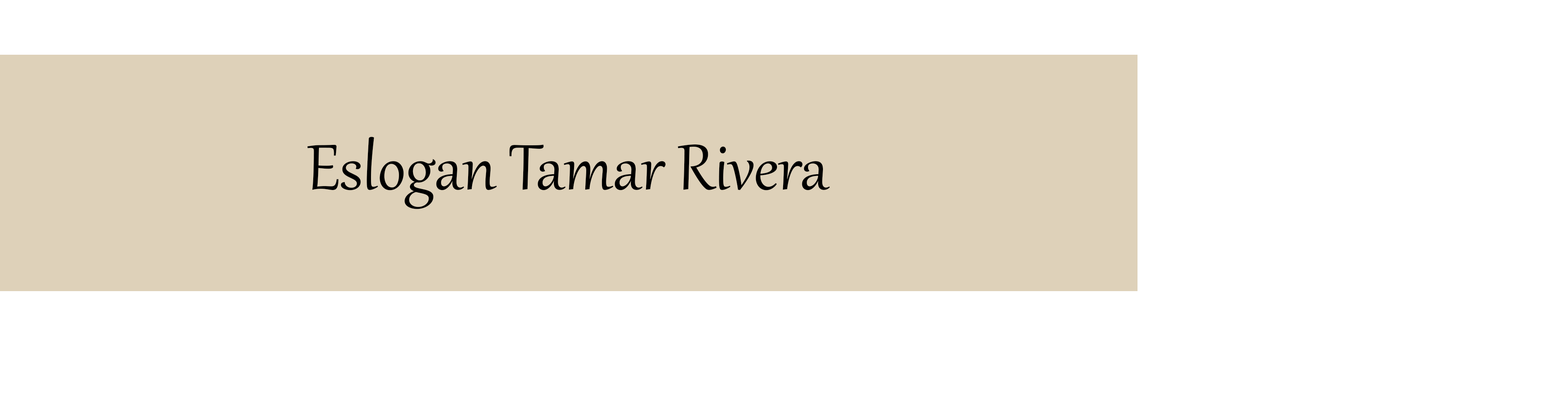
<style>
.page{position:relative;width:1568px;height:394px;background:#ffffff}
.page>*{position:absolute;margin:0}
.t1{font:78.8px "Gabriola";color:#000000}
</style>
<div class="page">
<p class="t1" style="left:307px;top:136px;width:523px;height:73px">Eslogan Tamar Rivera</p>
</div>
